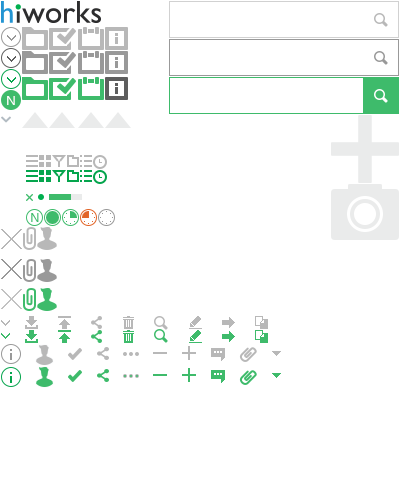
<style>
.page{position:relative;width:400px;height:500px;background:#ffffff}
.page>*{position:absolute;margin:0}
.t1{font:13px "MalgunGothicRegular";color:#ffffff}
.t2{font:11.5px "MalgunGothicRegular";color:#3ebb6b}
</style>
<div class="page">
<p class="t1" style="left:7px;top:96px;width:8px;height:9px">N</p>
<p class="t2" style="left:31px;top:213px;width:8px;height:9px">N</p>
</div>
